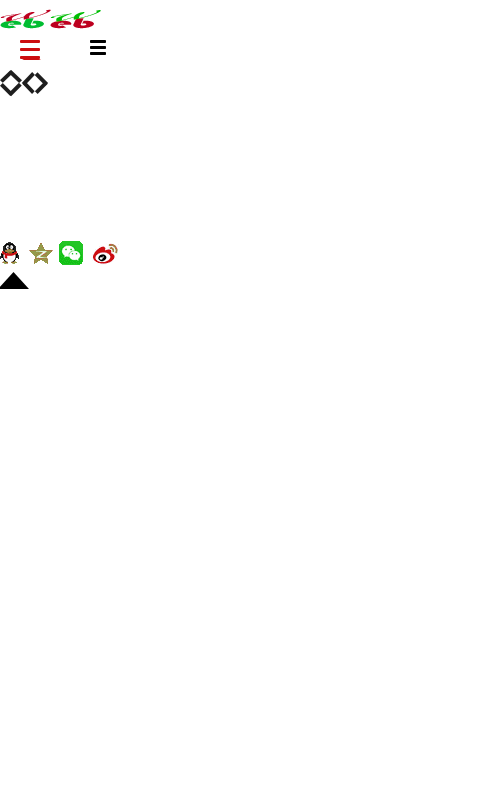
<style>
.page{position:relative;width:500px;height:800px;background:#ffffff}
.page>*{position:absolute;margin:0}
.t1{font:14.7px "STLiti";color:#bd001f;font-style:italic;scale:5.06 1}
.t2{font:14.7px "STLiti";color:#00bd04;font-style:italic;scale:5.06 1}
.t3{font:14.7px "STHupo";color:#00bd31;font-style:italic;scale:2.71 1}
.t4{font:14.7px "STHupo";color:#bd001f;font-style:italic;scale:2.71 1}
</style>
<div class="page">
<p class="t1" style="left:0px;top:9px;width:51px;height:13px;rotate:-7deg">w</p>
<p class="t2" style="left:50px;top:10px;width:51px;height:12px;rotate:-7deg">w</p>
<p class="t3" style="left:0px;top:18px;width:44px;height:11px">eb</p>
<p class="t4" style="left:50px;top:18px;width:44px;height:11px">eb</p>
</div>
